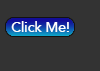
<style>
.page{position:relative;width:100px;height:71px;background:#333333}
.page>*{position:absolute;margin:0}
.t1{font:14px "AvenirLT-Medium";color:#ffffff}
</style>
<div class="page">
<p class="t1" style="left:11px;top:21px;width:58px;height:11px">Click Me!</p>
</div>
